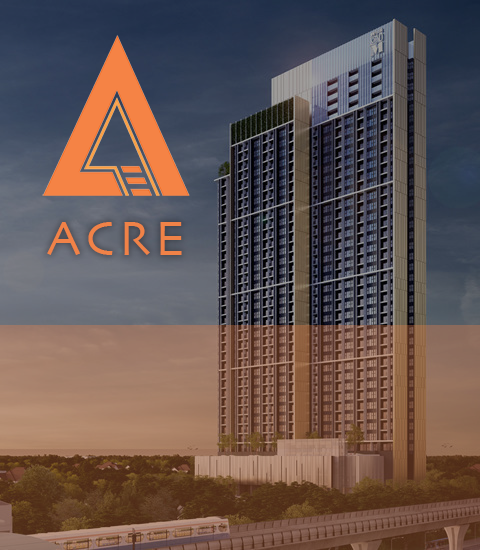
<style>
.page{position:relative;width:480px;height:550px}
.page>*{position:absolute;margin:0}
.t1{font:50px "Skia-Regular";letter-spacing:0.1em;color:#f58345}
</style>
<div class="page">
<p class="t1" style="left:47px;top:222px;width:135px;height:33px">ACRE</p>
</div>
